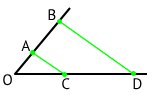
<style>
.page{position:relative;width:167px;height:95px;background:#ffffff}
.page>*{position:absolute;margin:0}
.t1{font:15.2px "PTSans-Regular";color:#000000}
</style>
<div class="page">
<p class="t1" style="left:48px;top:9px;width:8px;height:12px">B</p>
<p class="t1" style="left:21px;top:40px;width:10px;height:11px">A</p>
<p class="t1" style="left:3px;top:74px;width:9px;height:12px">O</p>
<p class="t1" style="left:62px;top:78px;width:8px;height:12px">C</p>
<p class="t1" style="left:133px;top:78px;width:9px;height:12px">D</p>
</div>
